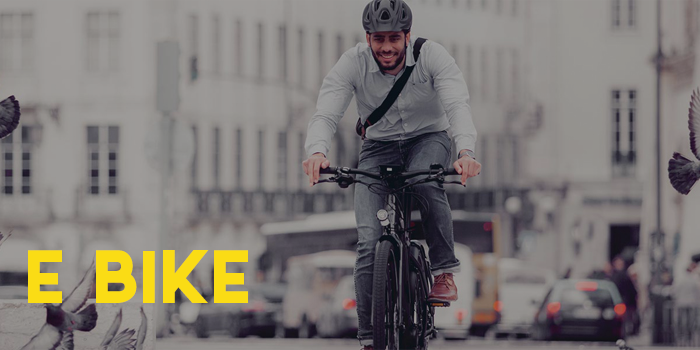
<style>
.page{position:relative;width:700px;height:350px}
.page>*{position:absolute;margin:0}
.t1{font:100px "Sabado";color:#fadc15}
</style>
<div class="page">
<p class="t1" style="left:28px;top:250px;width:220px;height:53px">e bike</p>
</div>
